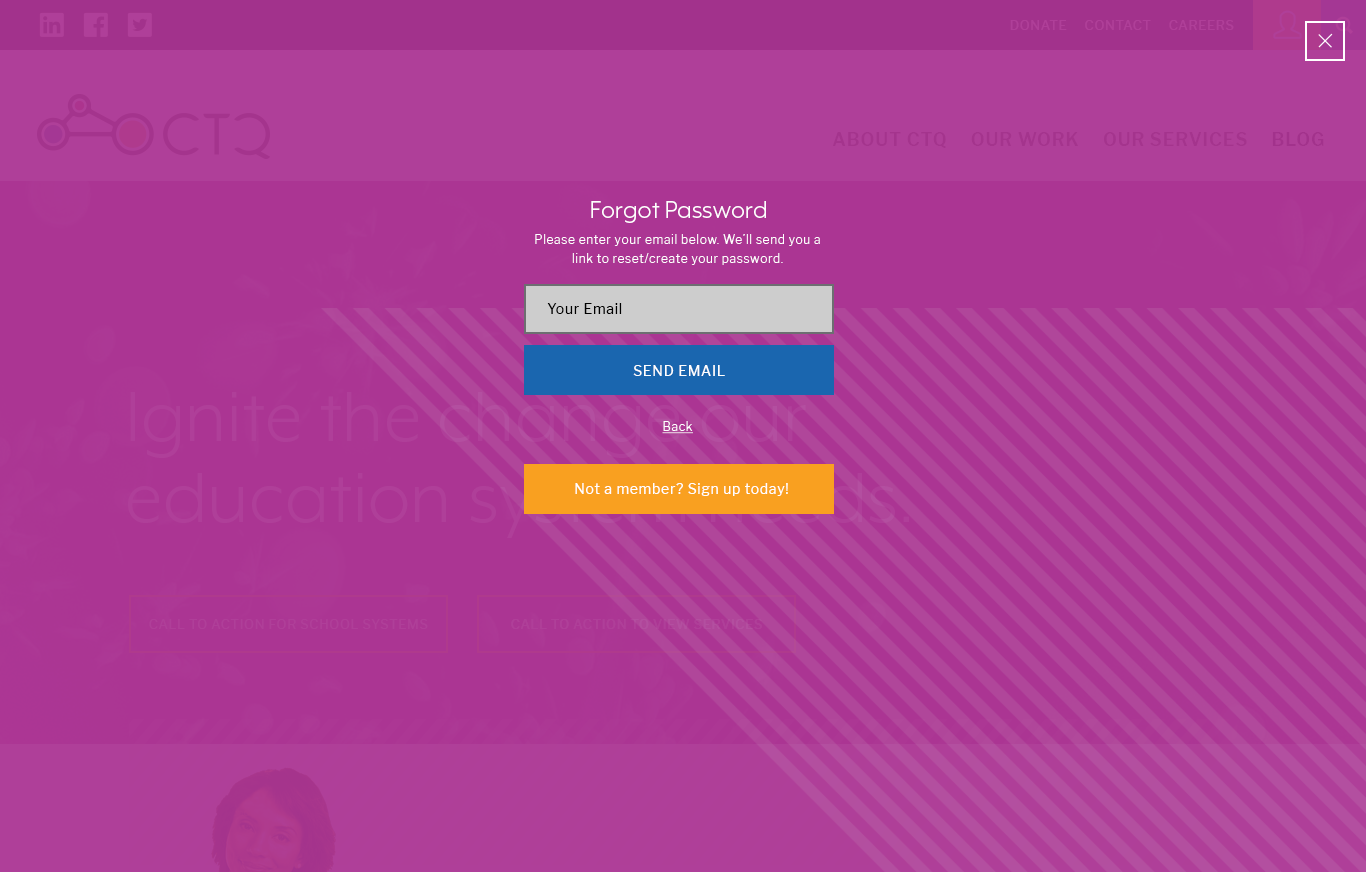
<style>
.page{position:relative;width:1366px;height:872px;background:#ab3593}
.page>*{position:absolute;margin:0}
.t1{font:27px "MrEavesXLModOT-Book";letter-spacing:0.005em;color:#ffffff}
.t2{font:12px/19px "LibreFranklin-Light";letter-spacing:0.05em;color:#ffffff}
.t3{font:14px "LibreFranklin-Regular";letter-spacing:0.05em;color:#000000}
.t4{font:14px "LibreFranklin-Regular";letter-spacing:0.05em;color:#ffffff}
.t5{font:12px "LibreFranklin-Light";letter-spacing:0.05em;color:#ffffff;text-decoration:underline}
</style>
<div class="page">
<p class="t1" style="left:591px;top:201px;width:175px;height:22px">Forgot Password</p>
<p class="t2" style="left:535px;top:234px;width:285px;height:31px;text-align:center">Please enter your email below. We’ll send you a link to reset/create your password.</p>
<p class="t3" style="left:547px;top:303px;width:75px;height:11px">Your Email</p>
<p class="t4" style="left:633px;top:365px;width:92px;height:11px">SEND EMAIL</p>
<p class="t5" style="left:662px;top:421px;width:31px;height:13px">Back</p>
<p class="t4" style="left:575px;top:483px;width:213px;height:13px">Not a member? Sign up today!</p>
</div>
